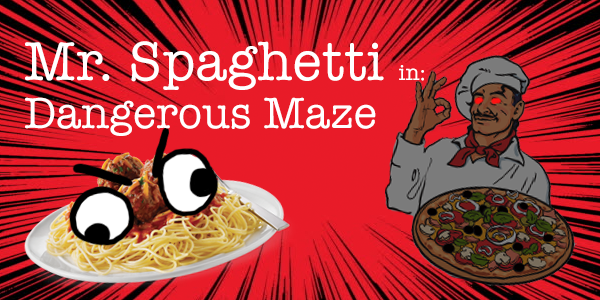
<style>
.page{position:relative;width:600px;height:300px}
.page>*{position:absolute;margin:0}
.t1{font:44.9px/47.9px "AmericanTypewriter";letter-spacing:0.012em;color:#ffffff;scale:0.97 1}
.t2{font:56.1px/47.9px "AmericanTypewriter";letter-spacing:0.012em;color:#ffffff;scale:0.97 1}
.t3{font:22.5px/47.9px "AmericanTypewriter";letter-spacing:0.012em;color:#ffffff;scale:0.97 1}
</style>
<div class="page">
<p class="t1" style="left:25px;top:41px;width:399px;height:95px"><span class="t2">Mr. Spaghetti </span><span class="t3">in:<br></span>Dangerous Maze</p>
</div>
